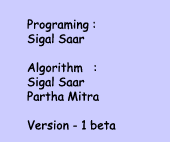
<style>
.page{position:relative;width:170px;height:142px;background:#ccccff}
.page>*{position:absolute;margin:0}
.t1{font:12px "ComicSansMS";color:#000002}
</style>
<div class="page">
<p class="t1" style="left:27px;top:19px;width:89px;height:111px">Programing : <br>Sigal Saar<br> <br>Algorithm   :<br>Sigal Saar <br>Partha Mitra<br><br>Version - 1 beta</p>
</div>
